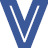
<style>
.page{position:relative;width:48px;height:48px;background:#3b5998}
.page>*{position:absolute;margin:0}
.t1{font:72px "Phosphate-Inline";color:#3b5998}
</style>
<div class="page">
<p class="t1" style="left:0px;top:0px;width:50px;height:48px">v</p>
</div>
